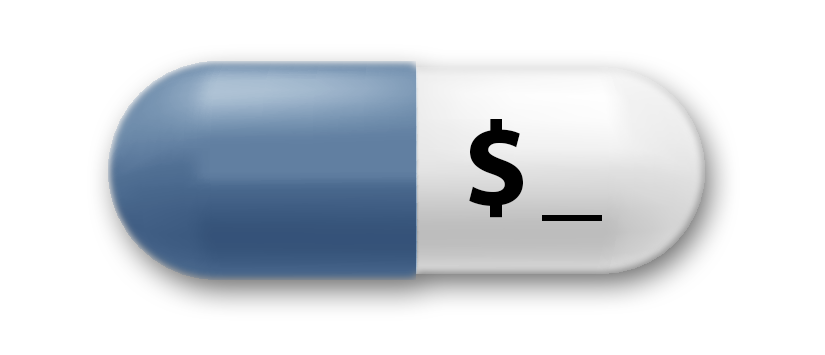
<style>
.page{position:relative;width:825px;height:355px;background:#ffffff}
.page>*{position:absolute;margin:0}
.t1{font:120px "MyriadPro-Bold";letter-spacing:-0.05em;color:#000000}
</style>
<div class="page">
<p class="t1" style="left:469px;top:119px;width:133px;height:102px">$ _</p>
</div>
